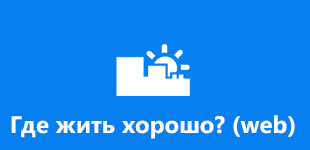
<style>
.page{position:relative;width:310px;height:150px;background:#067ff0}
.page>*{position:absolute;margin:0}
.t1{font:24px "SegoeWP-Bold";color:#ffffff}
</style>
<div class="page">
<p class="t1" style="left:11px;top:115px;width:284px;height:24px">Где жить хорошо? (web)</p>
</div>
